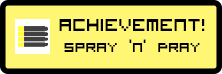
<style>
.page{position:relative;width:222px;height:74px;background:#fff774}
.page>*{position:absolute;margin:0}
.t1{font:18px "VisitorTT1BRK";color:#000000}
.t2{font:23px "VisitorTT1BRK";color:#000000}
</style>
<div class="page">
<p class="t1" style="left:59px;top:19px;width:146px;height:33px;text-align:center"><span class="t2">achievement!<br></span>Spray ‘n’ Pray</p>
</div>
